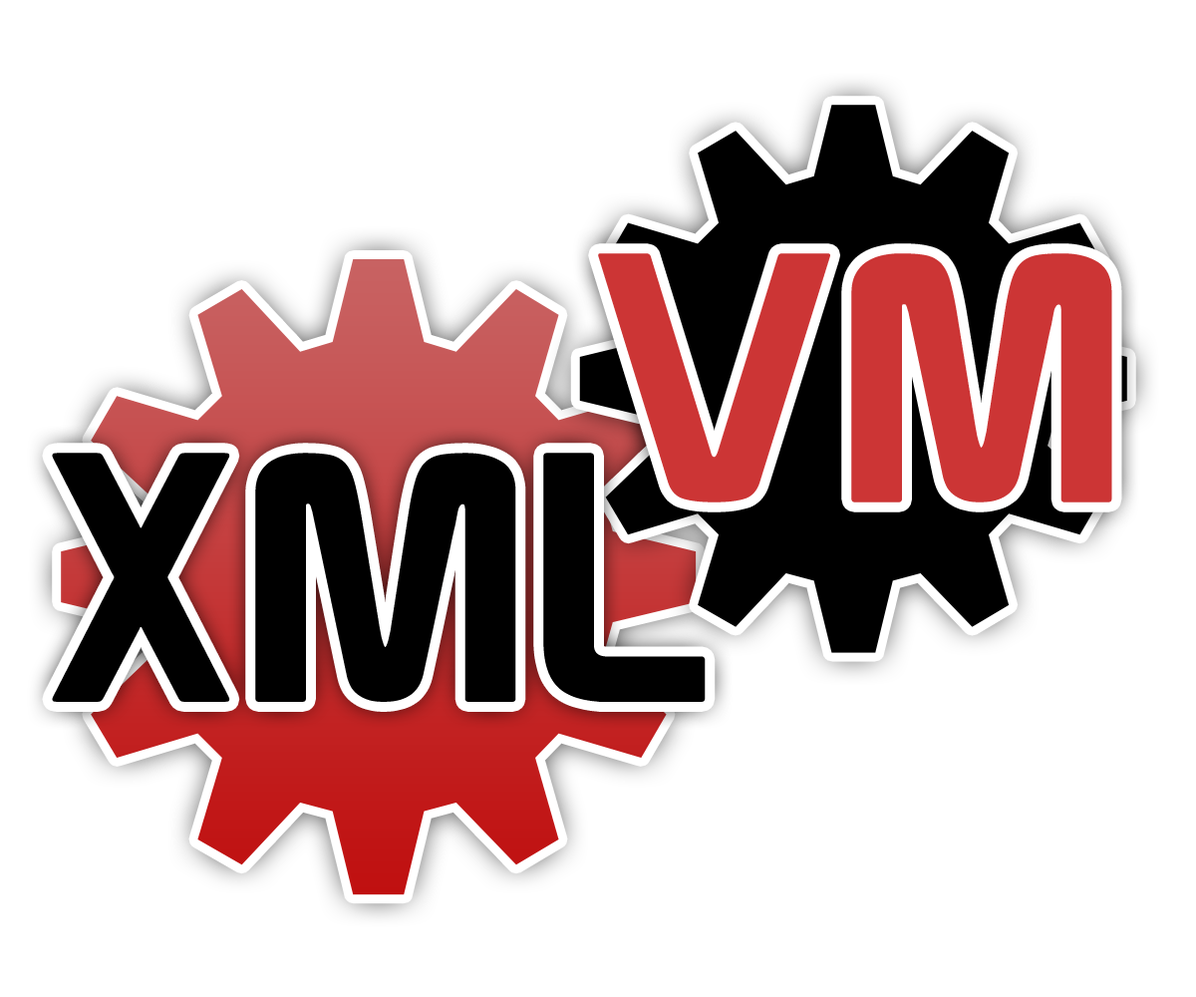
<style>
.page{position:relative;width:1196px;height:997px;background:#ffffff}
.page>*{position:absolute;margin:0}
.t1{font:346.6px "Prototype";color:#cc3535}
.t2{font:346.6px "Prototype";color:#000000}
</style>
<div class="page">
<p class="t1" style="left:598px;top:253px;width:514px;height:249px">VM</p>
<p class="t2" style="left:52px;top:453px;width:654px;height:249px">XML</p>
</div>
